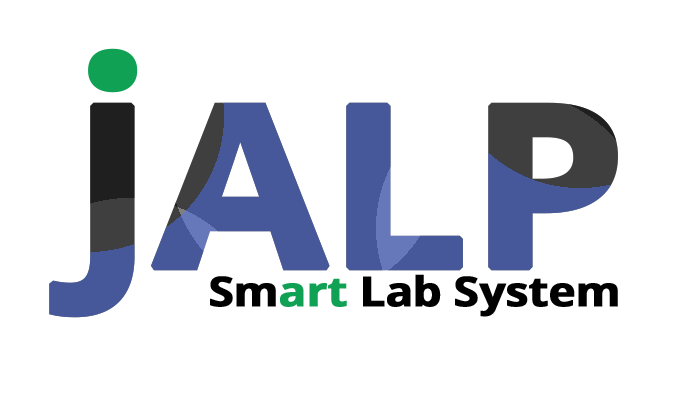
<style>
.page{position:relative;width:688px;height:393px;background:#ffffff}
.page>*{position:absolute;margin:0}
.t1{font:225px "OpenSans-Bold";letter-spacing:-0.025em;color:#10a154;font-weight:bold;scale:1.11 1}
.t2{font:225px "OpenSans-Bold";letter-spacing:-0.025em;font-weight:bold;scale:1.11 1}
.t3{font:41.2px "OpenSans-Bold";letter-spacing:-0.025em;color:#000000;font-weight:bold;scale:1.11 1}
.t4{font:41.2px "OpenSans-Bold";letter-spacing:-0.025em;color:#10a154;font-weight:bold;scale:1.11 1}
</style>
<div class="page">
<p class="t1" style="left:88px;top:48px;width:50px;height:45px">.</p>
<p class="t2" style="left:49px;top:102px;width:569px;height:216px">JALP</p>
<p class="t3" style="left:210px;top:274px;width:408px;height:43px">Sm<span class="t4">art</span> Lab System</p>
</div>
